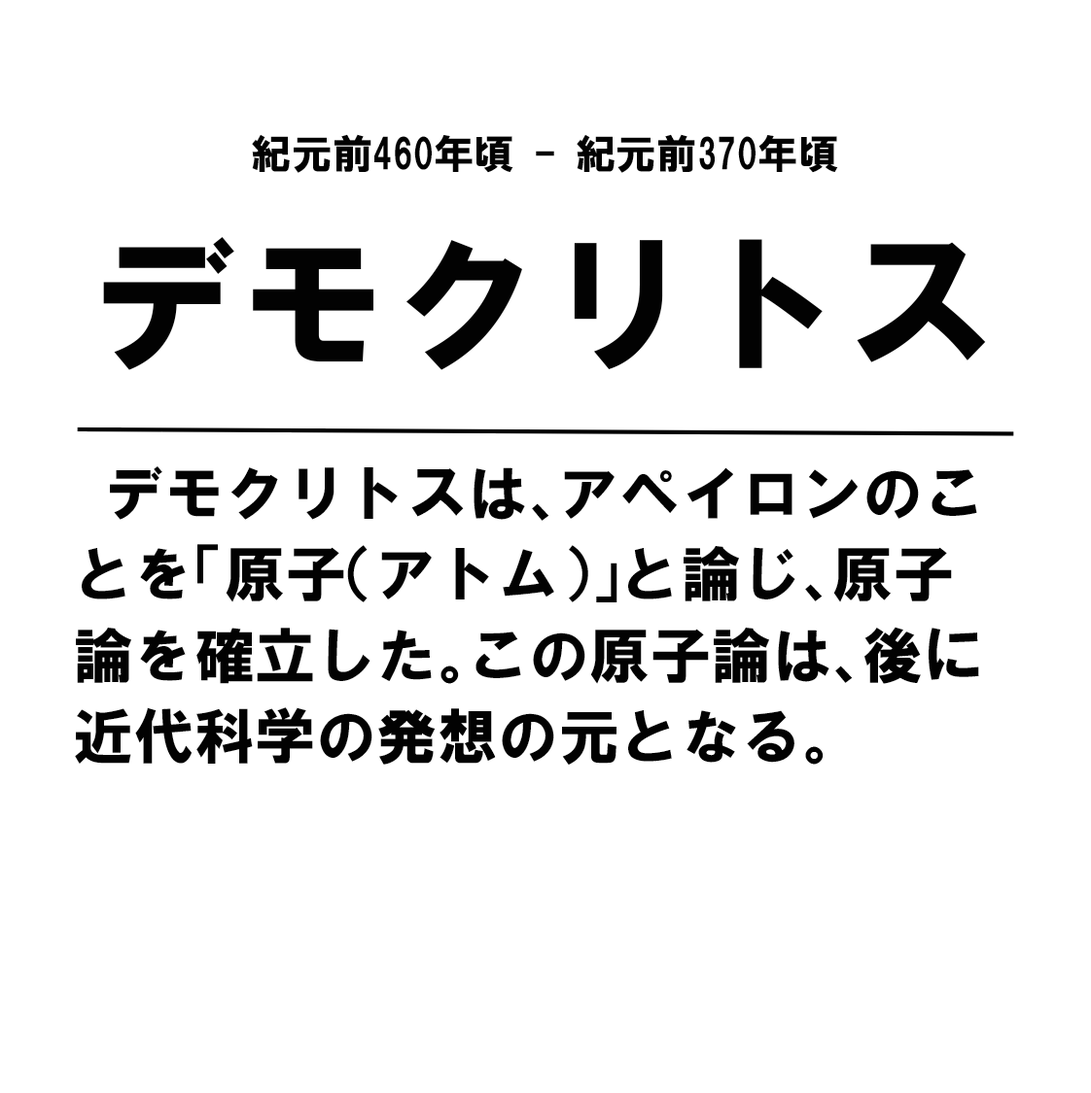
<style>
.page{position:relative;width:1091px;height:1093px;background:#ffffff}
.page>*{position:absolute;margin:0}
.t1{font:40.5px "HGSoeiKakugothicUB";color:#020202}
.t2{font:151.9px "HGSoeiKakugothicUB";color:#020202}
.t3{font:60.7px/81px "HGSoeiKakugothicUB";color:#020202}
</style>
<div class="page">
<p class="t1" style="left:252px;top:134px;width:586px;height:39px">紀元前460年頃 - 紀元前370年頃</p>
<p class="t2" style="left:103px;top:237px;width:883px;height:133px">デモクリトス</p>
<p class="t3" style="left:75px;top:467px;width:904px;height:298px">デモクリトスは、アペイロンのことを「原子（アトム）」と論じ、原子論を確立した。この原子論は、後に近代科学の発想の元となる。</p>
</div>
